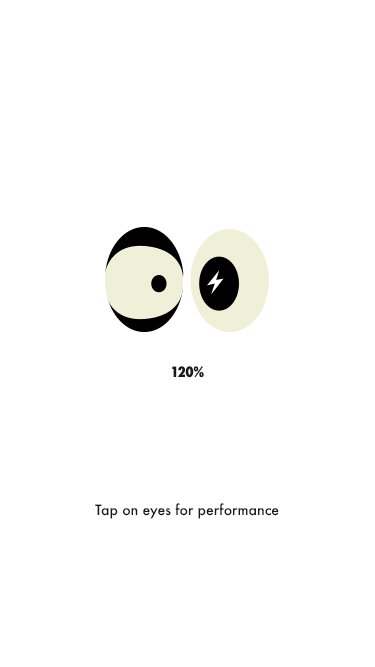
<style>
.page{position:relative;width:375px;height:667px;background:#ffffff}
.page>*{position:absolute;margin:0}
.t1{font:14px "Futura-CondensedExtraBold";letter-spacing:-0.025em;color:#191919}
.t2{font:14px "Futura-Medium";color:#191919}
</style>
<div class="page">
<p class="t1" style="left:172px;top:366px;width:32px;height:12px">120%</p>
<p class="t2" style="left:95px;top:503px;width:184px;height:16px">Tap on eyes for performance</p>
</div>
